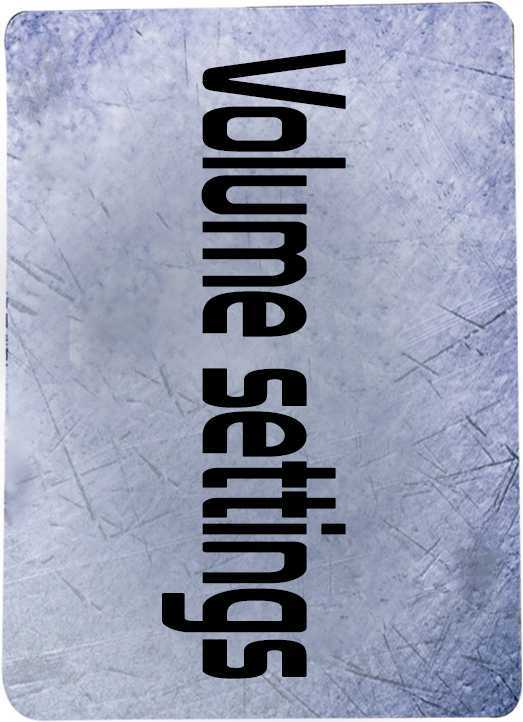
<style>
.page{position:relative;width:523px;height:722px}
.page>*{position:absolute;margin:0}
.t1{font:199.7px "Prototype";color:#000000;scale:0.44 1}
</style>
<div class="page">
<p class="t1" style="left:162px;top:49px;width:184px;height:630px;rotate:90deg">Volume settings</p>
</div>
